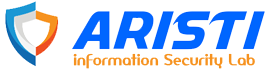
<style>
.page{position:relative;width:270px;height:76px;background:#ffffff}
.page>*{position:absolute;margin:0}
.t1{font:14.9px "AmerikaSans";color:#f6921f;font-weight:bold}
</style>
<div class="page">
<p class="t1" style="left:73px;top:53px;width:182px;height:16px">information Security Lab</p>
</div>
